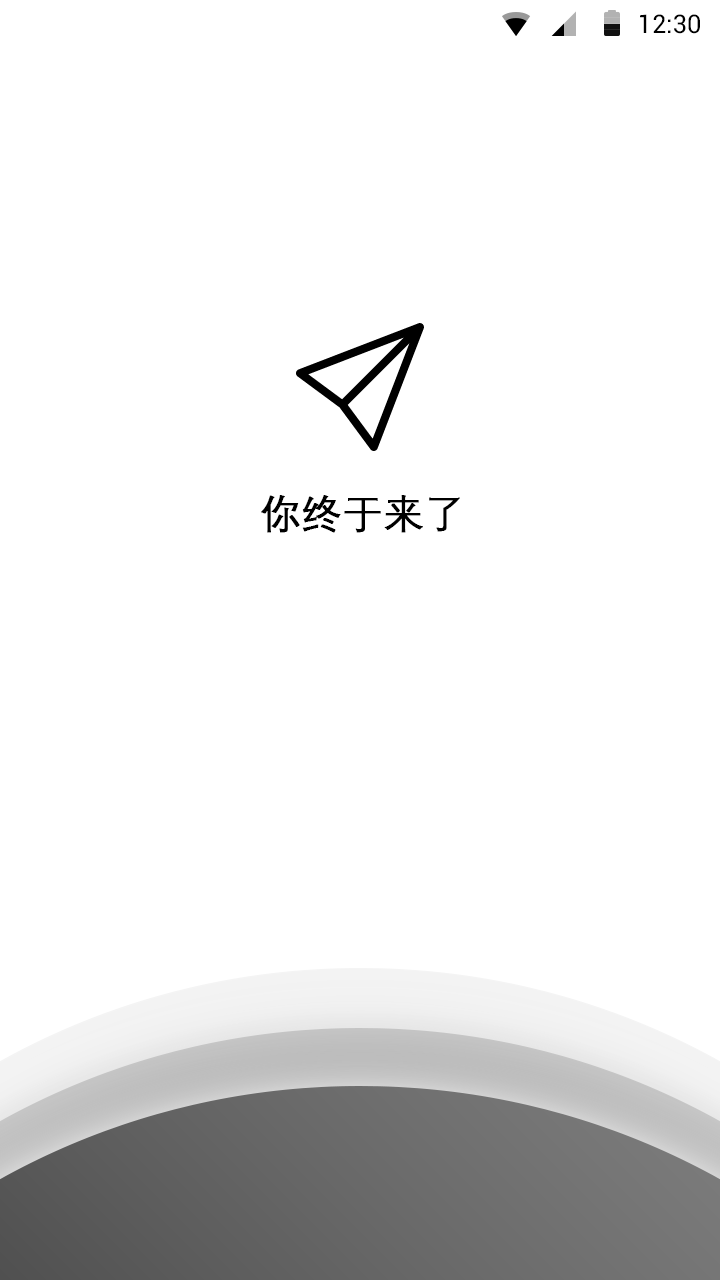
<style>
.page{position:relative;width:720px;height:1280px;background:#ffffff}
.page>*{position:absolute;margin:0}
.t1{font:25.4px "Roboto-Regular";color:#000000}
.t2{font:40px "DengXian-Regular";color:#000000;font-weight:bold}
</style>
<div class="page">
<p class="t1" style="left:640px;top:14px;width:60px;height:20px">12:30</p>
<p class="t2" style="left:261px;top:495px;width:199px;height:38px">你终于来了</p>
</div>
